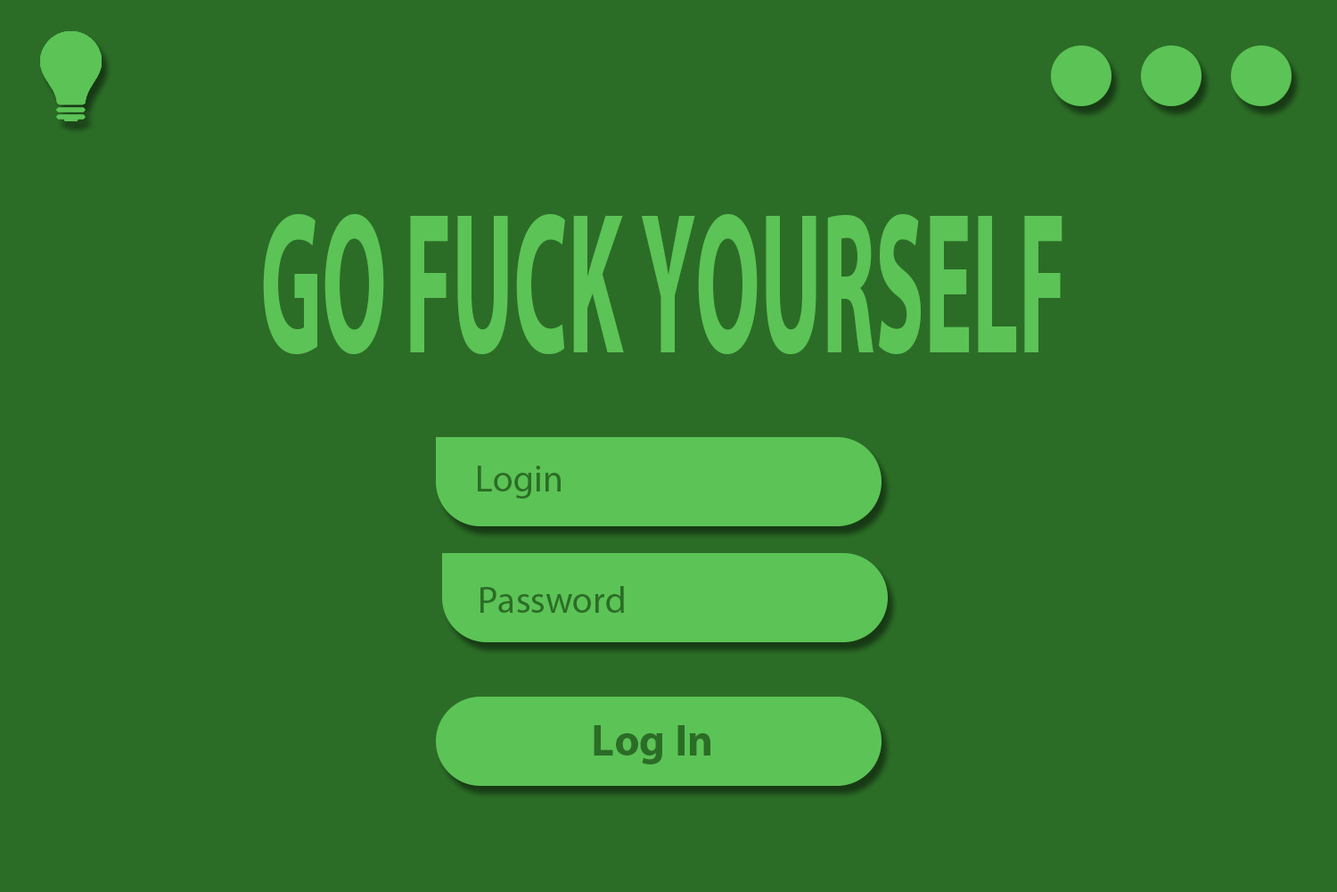
<style>
.page{position:relative;width:1337px;height:892px;background:#2b6d26}
.page>*{position:absolute;margin:0}
.t1{font:202.1px "MyriadPro-Bold";color:#5cc356;scale:0.45 1}
.t2{font:37.2px "MyriadPro-Regular";color:#2b6d26}
.t3{font:10.7px "MyriadPro-Bold";color:#2b6d26}
</style>
<div class="page">
<p class="t1" style="left:263px;top:213px;width:800px;height:142px">GO FUCK YOURSELF</p>
<p class="t1" style="left:263px;top:213px;width:800px;height:142px">GO FUCK YOURSELF</p>
<p class="t2" style="left:478px;top:465px;width:83px;height:33px">Login</p>
<p class="t2" style="left:479px;top:465px;width:83px;height:33px">Login</p>
<p class="t2" style="left:481px;top:586px;width:143px;height:27px">Password</p>
<p class="t2" style="left:481px;top:586px;width:144px;height:27px">Password</p>
<p class="t3" style="left:594px;top:725px;width:117px;height:39px">Log In</p>
<p class="t3" style="left:595px;top:725px;width:116px;height:39px">Log In</p>
</div>
